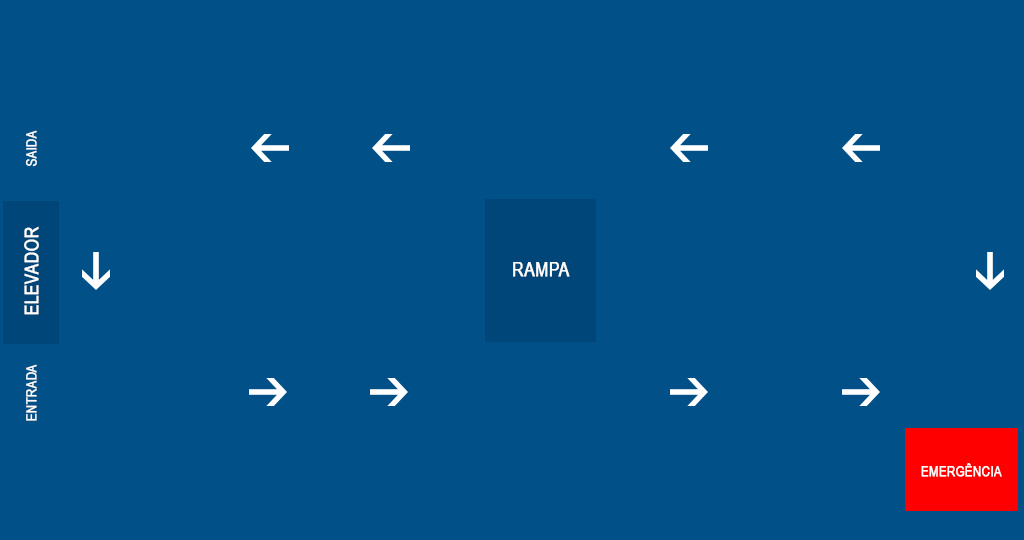
<style>
.page{position:relative;width:1024px;height:540px;background:#015088}
.page>*{position:absolute;margin:0}
.t1{font:14px "ArialNarrow";color:#ffffff;font-weight:bold}
.t2{font:19.2px "ArialNarrow";color:#ffffff;font-weight:bold}
</style>
<div class="page">
<p class="t1" style="left:25px;top:130px;width:12px;height:37px;rotate:-90deg">SAIDA</p>
<p class="t2" style="left:24px;top:226px;width:15px;height:89px;rotate:-90deg">ELEVADOR</p>
<p class="t2" style="left:513px;top:262px;width:57px;height:15px">RAMPA</p>
<p class="t1" style="left:26px;top:364px;width:11px;height:57px;rotate:-90deg">ENTRADA</p>
<p class="t1" style="left:921px;top:463px;width:81px;height:14px">EMERGÊNCIA</p>
</div>
